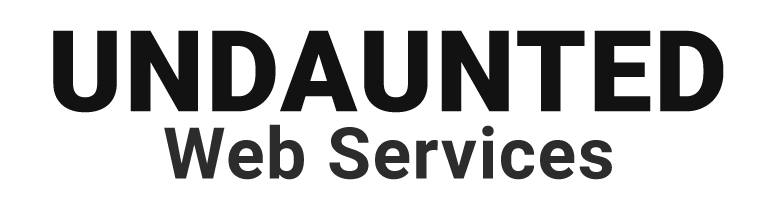
<style>
.page{position:relative;width:763px;height:209px;background:#ffffff}
.page>*{position:absolute;margin:0}
.t1{font:112.8px "Roboto-Black";letter-spacing:0.02em;color:#121212}
.t2{font:71.6px "Roboto-Bold";letter-spacing:0.02em;color:#2c2c2c}
</style>
<div class="page">
<p class="t1" style="left:53px;top:30px;width:671px;height:83px">UNDAUNTED</p>
<p class="t2" style="left:164px;top:124px;width:448px;height:56px">Web Services</p>
</div>
